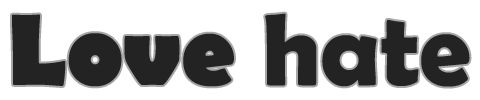
<style>
.page{position:relative;width:480px;height:100px;background:#ffffff}
.page>*{position:absolute;margin:0}
.t1{font:102.5px "BerlinSansFB-Bold";color:#242424}
.t2{font:102.5px "BerlinSansFBDemi-Bold";color:#242424}
</style>
<div class="page">
<p class="t1" style="left:12px;top:13px;width:458px;height:74px">Love <span class="t2">hate</span></p>
</div>
